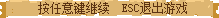
<style>
.page{position:relative;width:219px;height:18px;background:#deb671}
.page>*{position:absolute;margin:0}
.t1{font:12px "FZXS12--GB1-0";color:#5c3312}
</style>
<div class="page">
<p class="t1" style="left:38px;top:2px;width:149px;height:12px">按任意键继续  ESC退出游戏</p>
</div>
